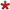
<style>
.page{position:relative;width:10px;height:10px;background:#ffffff}
.page>*{position:absolute;margin:0}
.t1{font:23px "Haettenschweiler";color:#b32217}
</style>
<div class="page">
<p class="t1" style="left:0px;top:0px;width:10px;height:10px">*</p>
</div>
